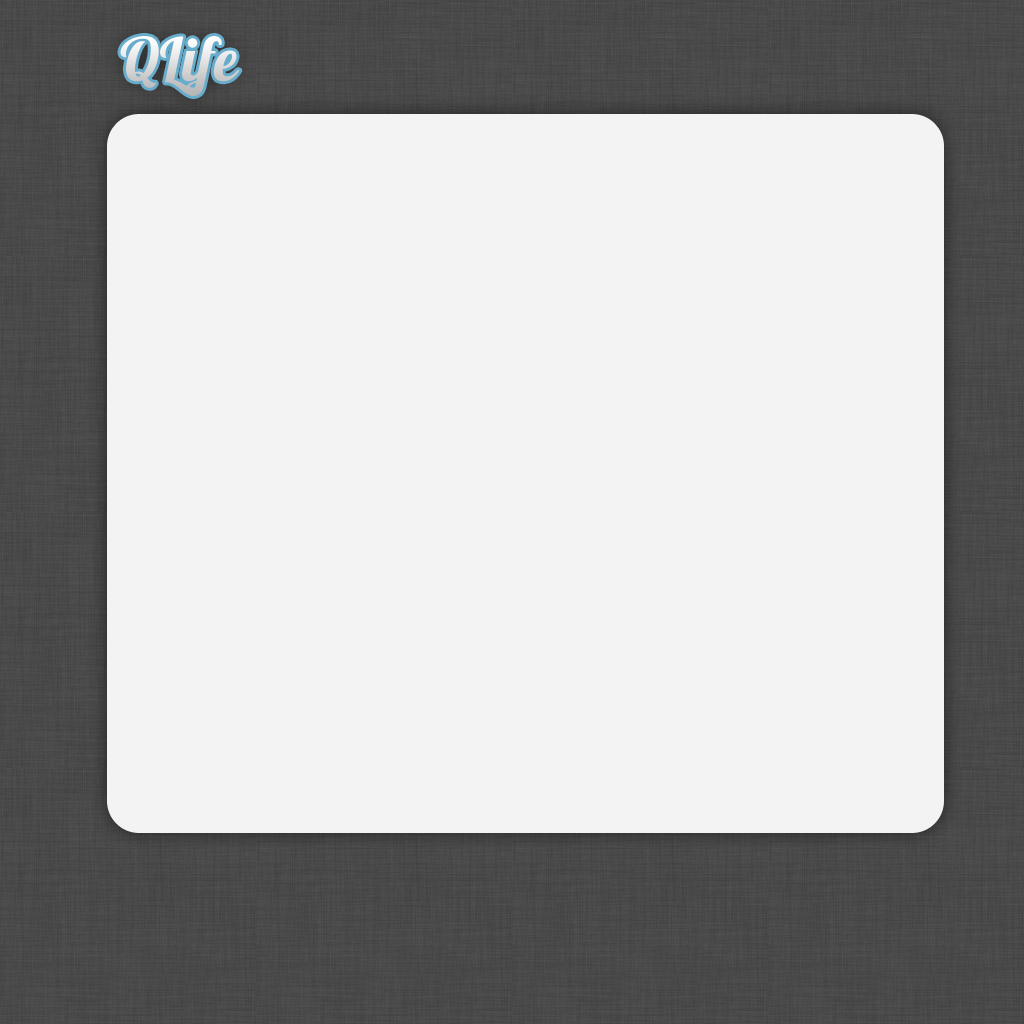
<style>
.page{position:relative;width:1024px;height:1024px;background:#f3f3f3}
.page>*{position:absolute;margin:0}
.t1{font:60px "Lobster1.4"}
</style>
<div class="page">
<p class="t1" style="left:120px;top:36px;width:120px;height:60px">QLife</p>
</div>
